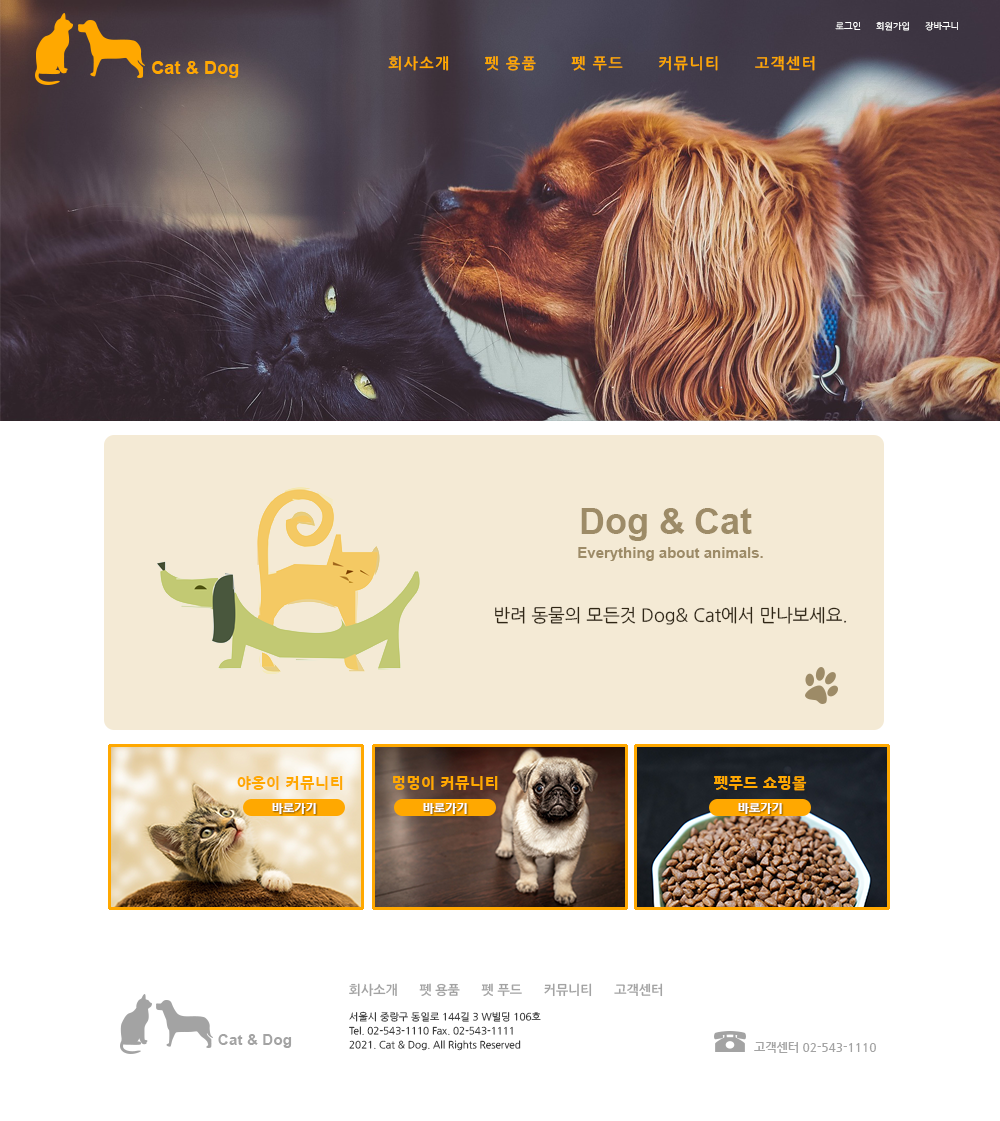
<style>
.page{position:relative;width:1000px;height:1121px;background:#ffffff}
.page>*{position:absolute;margin:0}
.t1{font:9px "NanumGothic";color:#ffffff}
.t2{font:18.4px "Arial-BoldMT";color:#ffa800}
.t3{font:14.9px "NanumGothicBold";letter-spacing:0.1em;color:#ffa800}
.t4{font:15px/24px "Arial-BoldMT";color:#9d8b67}
.t5{font:36px/24px "Arial-BoldMT";color:#9d8b67}
.t6{font:18.1px "NanumGothic";color:#302614}
.t7{font:15px "NanumGothicExtraBold";letter-spacing:0.04em;color:#ffa800}
.t8{font:12px "NanumGothicExtraBold";color:#fefefe}
.t9{font:12.9px "NanumGothicBold";color:#a3a3a3}
.t10{font:10px/14px "NanumGothic"}
.t11{font:15.3px "Arial-BoldMT";color:#a3a3a3}
.t12{font:12px "NanumGothicBold";color:#a3a3a3}
</style>
<div class="page">
<p class="t1" style="left:835px;top:21px;width:123px;height:10px">로그인      회원가입      장바구니</p>
<p class="t2" style="left:152px;top:61px;width:87px;height:17px">Cat &amp; Dog</p>
<p class="t3" style="left:388px;top:56px;width:427px;height:15px">회사소개      펫 용품      펫 푸드      커뮤니티      고객센터</p>
<p class="t4" style="left:578px;top:508px;width:185px;height:53px;text-align:center"><span class="t5">Dog &amp; Cat <br></span>Everything about animals.</p>
<p class="t6" style="left:495px;top:606px;width:352px;height:19px">반려 동물의 모든것 Dog&amp; Cat에서 만나보세요.</p>
<p class="t7" style="left:237px;top:776px;width:106px;height:14px">야옹이 커뮤니티</p>
<p class="t7" style="left:393px;top:776px;width:105px;height:14px">멍멍이 커뮤니티</p>
<p class="t7" style="left:714px;top:776px;width:93px;height:15px">펫푸드 쇼핑몰</p>
<p class="t8" style="left:272px;top:803px;width:44px;height:11px">바로가기</p>
<p class="t8" style="left:423px;top:803px;width:44px;height:11px">바로가기</p>
<p class="t8" style="left:738px;top:803px;width:44px;height:11px">바로가기</p>
<p class="t9" style="left:349px;top:983px;width:314px;height:14px">회사소개      펫 용품      펫 푸드      커뮤니티      고객센터</p>
<p class="t10" style="left:349px;top:1011px;width:192px;height:40px">서울시 중랑구 동일로 144길 3 W빌딩 106호<br>Tel. 02-543-1110 Fax. 02-543-1111<br>2021. Cat &amp; Dog. All Rights Reserved</p>
<p class="t11" style="left:218px;top:1034px;width:74px;height:14px">Cat &amp; Dog</p>
<p class="t12" style="left:754px;top:1042px;width:122px;height:11px">고객센터 02-543-1110</p>
</div>
